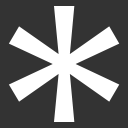
<style>
.page{position:relative;width:128px;height:128px;background:#333333}
.page>*{position:absolute;margin:0}
.t1{font:314.4px "Cambria";color:#ffffff}
</style>
<div class="page">
<p class="t1" style="left:8px;top:6px;width:112px;height:116px">*</p>
</div>
